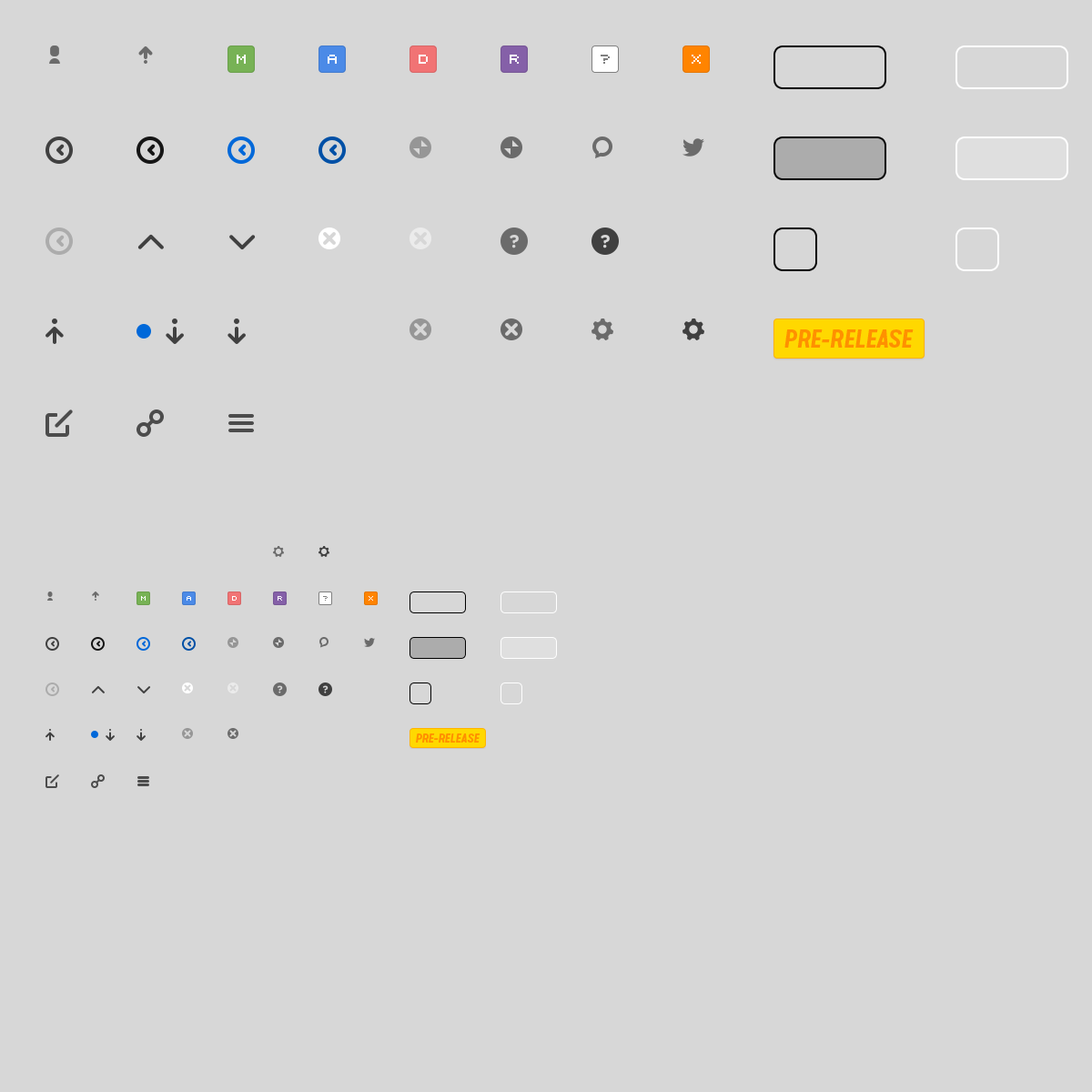
<style>
.page{position:relative;width:1092px;height:1092px;background:#d7d7d7}
.page>*{position:absolute;margin:0}
.t1{font:25.5px "VanCondensedPro-BoldItalic";letter-spacing:-0.05em;color:#ff9000}
.t2{font:12.7px "VanCondensedPro-BoldItalic";letter-spacing:-0.05em;color:#ff9000}
</style>
<div class="page">
<p class="t1" style="left:784px;top:329px;width:130px;height:19px">PRE-RELEASE</p>
<p class="t2" style="left:416px;top:733px;width:64px;height:10px">PRE-RELEASE</p>
</div>
